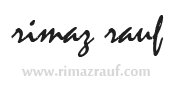
<style>
.page{position:relative;width:178px;height:100px;background:#ffffff}
.page>*{position:absolute;margin:0}
.t1{font:42.9px "Mistral";color:#1f1f1f}
.t2{font:22.6px "MoolBoran";color:#d7d7d7}
</style>
<div class="page">
<p class="t1" style="left:11px;top:15px;width:153px;height:42px">rimaz rauf</p>
<p class="t2" style="left:21px;top:64px;width:129px;height:13px">www.rimazrauf.com</p>
</div>
